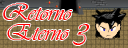
<style>
.page{position:relative;width:128px;height:48px}
.page>*{position:absolute;margin:0}
.t1{font:24px "Vivaldi";color:#ff0000}
.t2{font:32px "Vivaldi";color:#ff0000}
</style>
<div class="page">
<p class="t1" style="left:3px;top:3px;width:69px;height:17px">Retorno</p>
<p class="t1" style="left:7px;top:24px;width:62px;height:16px">Eterno</p>
<p class="t2" style="left:73px;top:24px;width:17px;height:21px">3</p>
</div>
